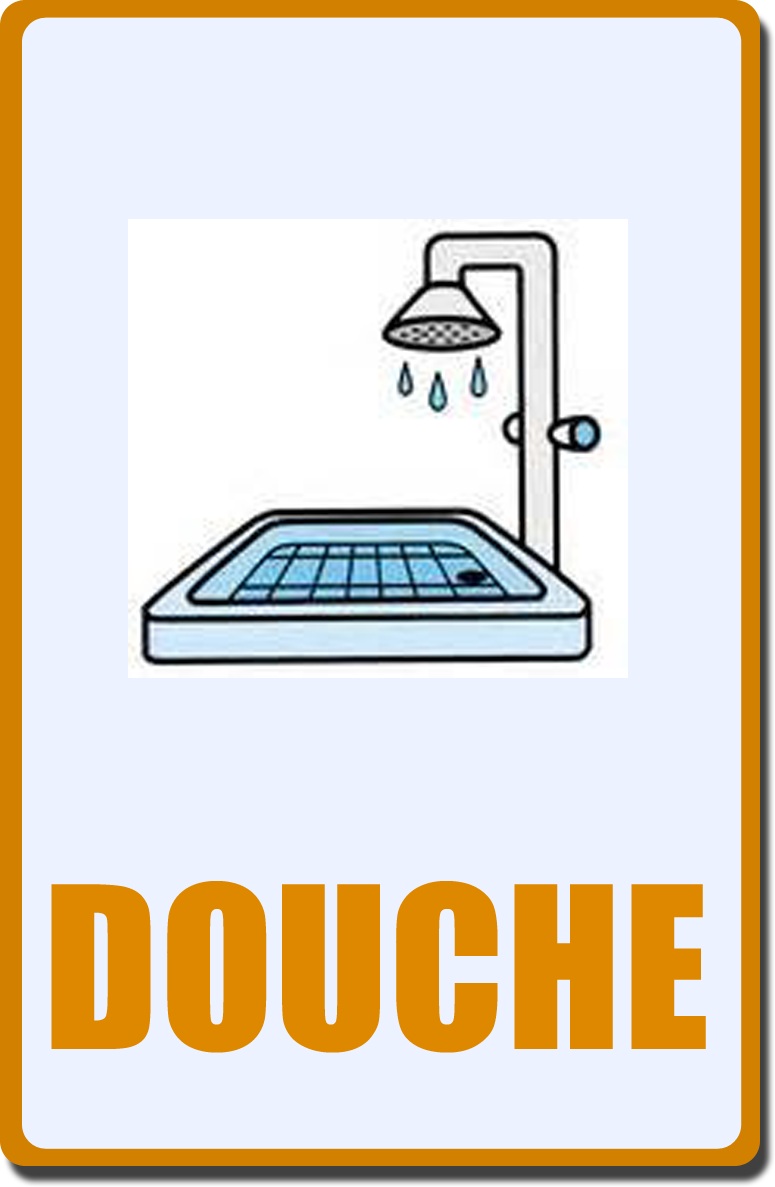
<style>
.page{position:relative;width:775px;height:1187px;background:#ecf2ff}
.page>*{position:absolute;margin:0}
.t1{font:208.3px "Impact";letter-spacing:0.005em;color:#de8800}
</style>
<div class="page">
<p class="t1" style="left:51px;top:881px;width:655px;height:172px">DOUCHE</p>
</div>
